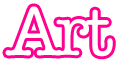
<style>
.page{position:relative;width:118px;height:64px;background:#ffffff}
.page>*{position:absolute;margin:0}
.t1{font:72px "AmerTypewriterITCbyBT-Medium";letter-spacing:-0.06em;color:#ffffff}
</style>
<div class="page">
<p class="t1" style="left:5px;top:6px;width:108px;height:51px">Art</p>
</div>
